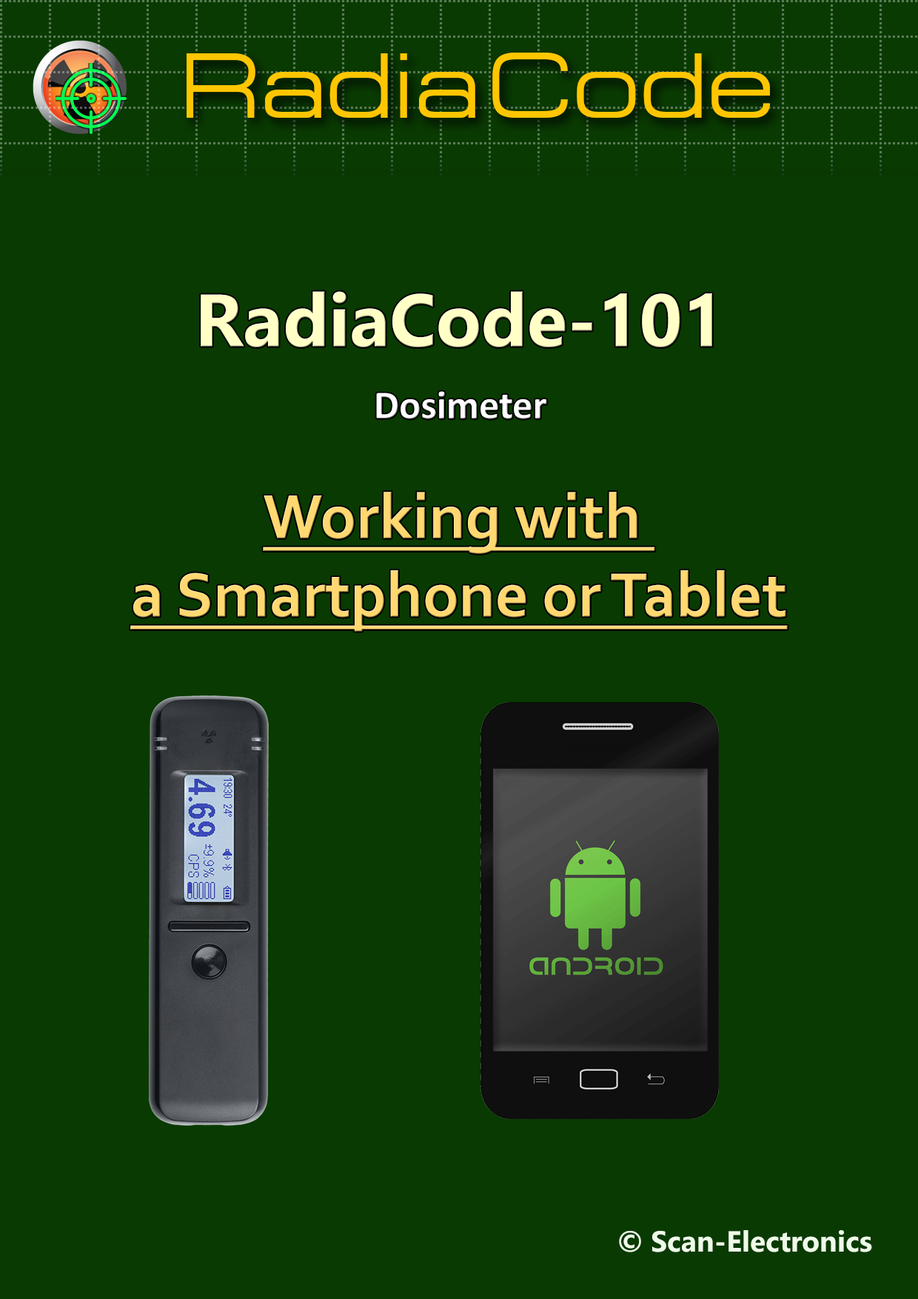
<style>
.page{position:relative;width:918px;height:1299px;background:#093a01}
.page>*{position:absolute;margin:0}
.t1{font:92.6px "EuropeExtNormal";color:#fec602}
.t2{font:74px "SegoeUI-Bold";color:#ffffc6}
.t3{font:40.1px "Calibri-Bold";color:#ffffff}
.t4{font:65.3px "Corbel-Bold";color:#ffd870;text-decoration:underline}
.t5{font:29px "SegoeUI-Bold";color:#effbe9}
</style>
<div class="page">
<p class="t1" style="left:187px;top:53px;width:288px;height:65px">Radia</p>
<p class="t1" style="left:492px;top:53px;width:278px;height:65px">Code</p>
<p class="t2" style="left:201px;top:291px;width:511px;height:56px">RadiaCode-101</p>
<p class="t3" style="left:376px;top:391px;width:171px;height:28px">Dosimeter</p>
<p class="t4" style="left:130px;top:492px;width:658px;height:140px;text-align:center">Working with <br>a Smartphone or Tablet</p>
<p class="t5" style="left:619px;top:1230px;width:253px;height:22px">© Scan-Electronics</p>
</div>
